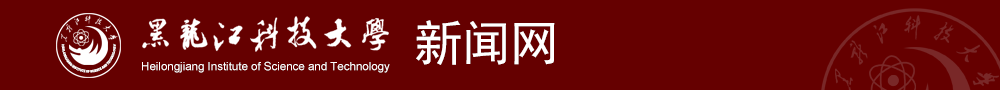
<style>
.page{position:relative;width:1000px;height:90px;background:#650000}
.page>*{position:absolute;margin:0}
.t1{font:48px "SimHei";color:#ffffff}
.t2{font:11.5px "ArialMT";color:#ffffff}
</style>
<div class="page">
<p class="t1" style="left:416px;top:20px;width:139px;height:45px">新闻网</p>
<p class="t2" style="left:142px;top:61px;width:248px;height:12px">Heilongjiang Institute of Science and Technology</p>
</div>
